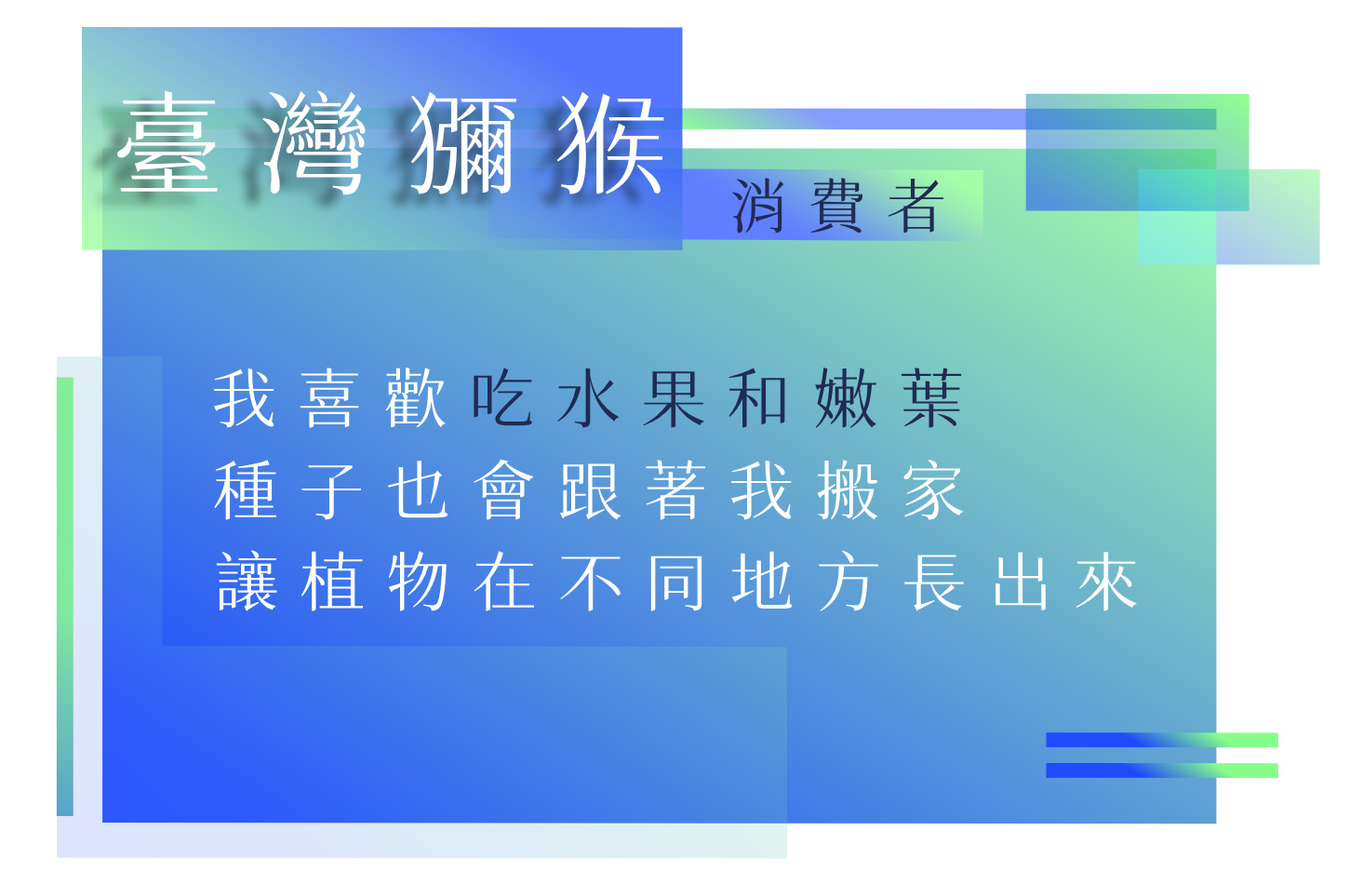
<style>
.page{position:relative;width:1349px;height:884px;background:#ffffff}
.page>*{position:absolute;margin:0}
.t1{font:111.6px "SweiSpringCJKtc-Regular";letter-spacing:0.32em;color:#ffffff;text-transform:uppercase}
.t2{font:59.5px "SweiSpringCJKtc-Regular";letter-spacing:0.32em;color:#202b54;text-transform:uppercase}
.t3{font:65.1px "SweiSpringCJKtc-Regular";letter-spacing:0.32em;color:#202b54;text-transform:uppercase}
.t4{font:65.1px "SweiSpringCJKtc-Regular";letter-spacing:0.32em;color:#ffffff;text-transform:uppercase}
</style>
<div class="page">
<p class="t1" style="left:115px;top:90px;width:549px;height:105px">臺灣獼猴</p>
<p class="t2" style="left:731px;top:178px;width:213px;height:56px">消費者</p>
<p class="t3" style="left:213px;top:367px;width:749px;height:61px"><span class="t4">我喜歡</span>吃水果和嫩葉</p>
<p class="t4" style="left:214px;top:459px;width:750px;height:61px">種子也會跟著我搬家</p>
<p class="t4" style="left:216px;top:550px;width:921px;height:61px">讓植物在不同地方長出來</p>
</div>
